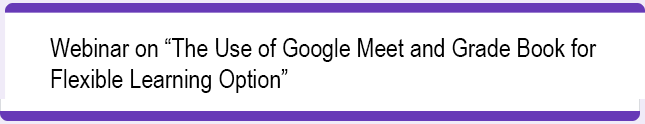
<style>
.page{position:relative;width:645px;height:124px;background:#ffffff}
.page>*{position:absolute;margin:0}
.t1{font:26px "ArialNarrow";color:#000000}
</style>
<div class="page">
<p class="t1" style="left:50px;top:38px;width:547px;height:55px">Webinar on “The Use of Google Meet and Grade Book for<br>Flexible Learning Option”</p>
</div>
